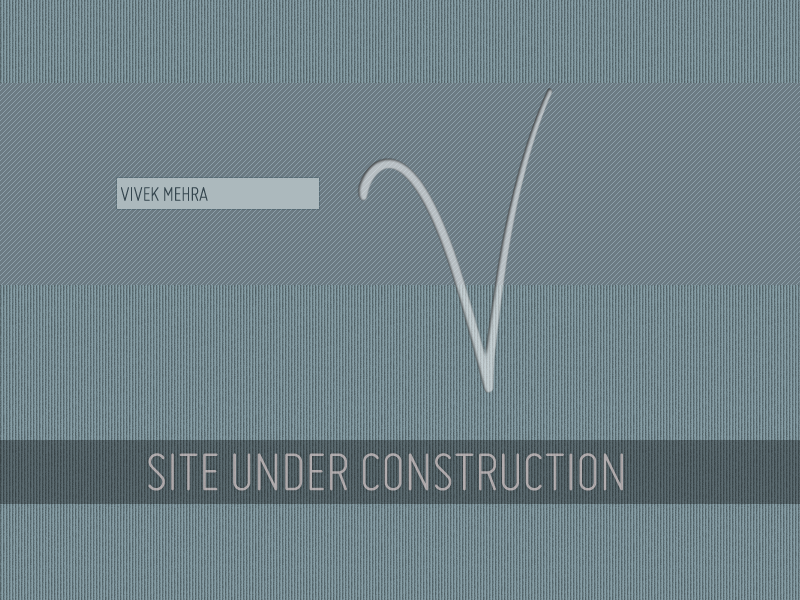
<style>
.page{position:relative;width:800px;height:600px;background:#6c7b83}
.page>*{position:absolute;margin:0}
.t1{font:22px "Miso-Light";letter-spacing:-0.024em;color:#34454e}
.t2{font:60px "Miso-Light";letter-spacing:-0.024em;color:#afaaac}
</style>
<div class="page">
<p class="t1" style="left:121px;top:187px;width:87px;height:14px">VIVEK MEHRA</p>
<p class="t2" style="left:148px;top:453px;width:475px;height:38px">SITE UNDER CONSTRUCTION</p>
</div>
